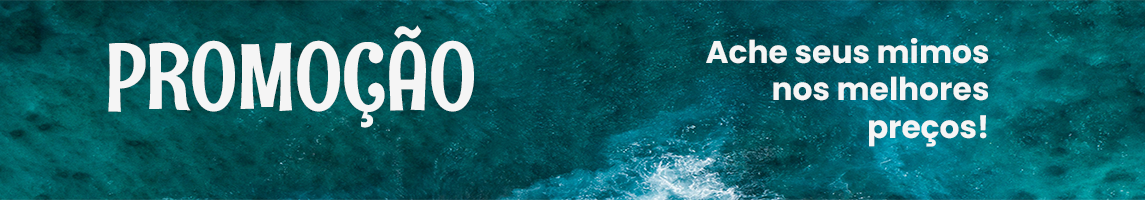
<style>
.page{position:relative;width:1145px;height:200px}
.page>*{position:absolute;margin:0}
.t1{font:93.9px "RumRaisin-Regular";color:#f5f5f5}
.t2{font:31.3px "Poppins-Bold";color:#f5f5f5}
</style>
<div class="page">
<p class="t1" style="left:108px;top:25px;width:366px;height:103px">PROMOÇÃO</p>
<p class="t2" style="left:706px;top:38px;width:282px;height:109px;text-align:right">Ache seus mimos <br>nos melhores preços!</p>
</div>
